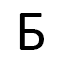
<style>
.page{position:relative;width:64px;height:64px;background:#ffffff}
.page>*{position:absolute;margin:0}
.t1{font:58.3px "Calibri";color:#000000}
</style>
<div class="page">
<p class="t1" style="left:19px;top:13px;width:25px;height:37px">Б</p>
</div>
